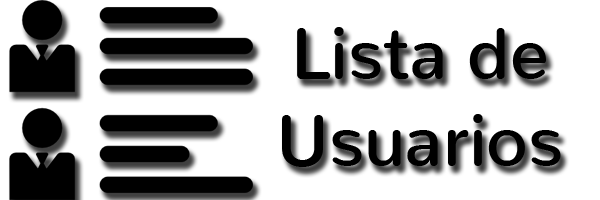
<style>
.page{position:relative;width:600px;height:200px;background:#ffffff}
.page>*{position:absolute;margin:0}
.t1{font:72px "Nunito-SemiBold";color:#000000}
</style>
<div class="page">
<p class="t1" style="left:282px;top:27px;width:279px;height:140px;text-align:center">Lista de Usuarios</p>
</div>
